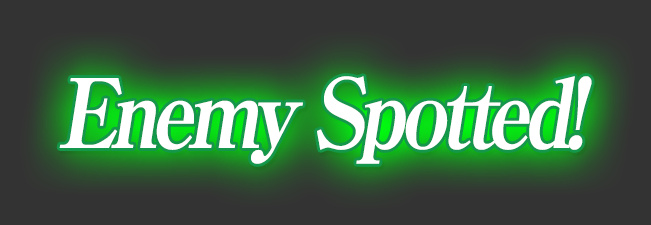
<style>
.page{position:relative;width:651px;height:225px;background:#333333}
.page>*{position:absolute;margin:0}
.t1{font:96px "RyuminPro-ExBold";letter-spacing:-0.08em;color:#ffffff;font-style:italic;scale:0.9 1}
</style>
<div class="page">
<p class="t1" style="left:59px;top:76px;width:533px;height:88px">Enemy Spotted!</p>
</div>
